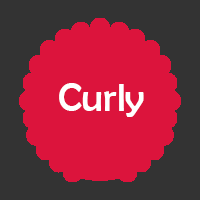
<style>
.page{position:relative;width:200px;height:200px;background:#333333}
.page>*{position:absolute;margin:0}
.t1{font:40px "BerlinSansFB-Reg";color:#ffffff}
</style>
<div class="page">
<p class="t1" style="left:59px;top:83px;width:85px;height:34px">Curly</p>
</div>
